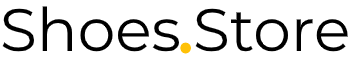
<style>
.page{position:relative;width:350px;height:60px;background:#ffffff}
.page>*{position:absolute;margin:0}
.t1{font:60px "Montserrat-Regular";color:#000000}
.t2{font:100px "Montserrat-Regular";color:#ffc107}
</style>
<div class="page">
<p class="t1" style="left:2px;top:6px;width:177px;height:46px">Shoes</p>
<p class="t1" style="left:195px;top:8px;width:153px;height:44px">Store</p>
<p class="t2" style="left:180px;top:42px;width:11px;height:12px">.</p>
</div>
